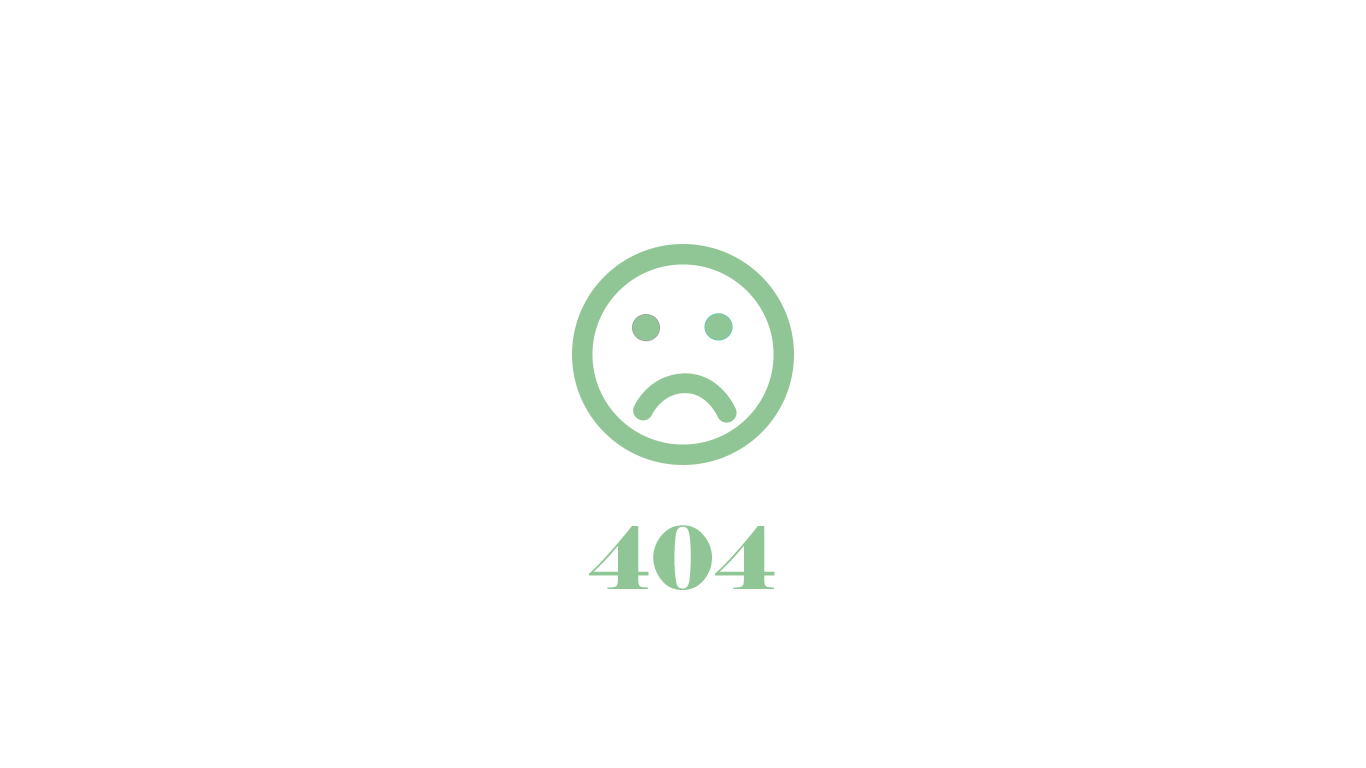
<style>
.page{position:relative;width:1366px;height:768px;background:#ffffff}
.page>*{position:absolute;margin:0}
.t1{font:85.9px "Elephant-Regular";color:#90c695}
</style>
<div class="page">
<p class="t1" style="left:589px;top:525px;width:186px;height:65px">404</p>
</div>
